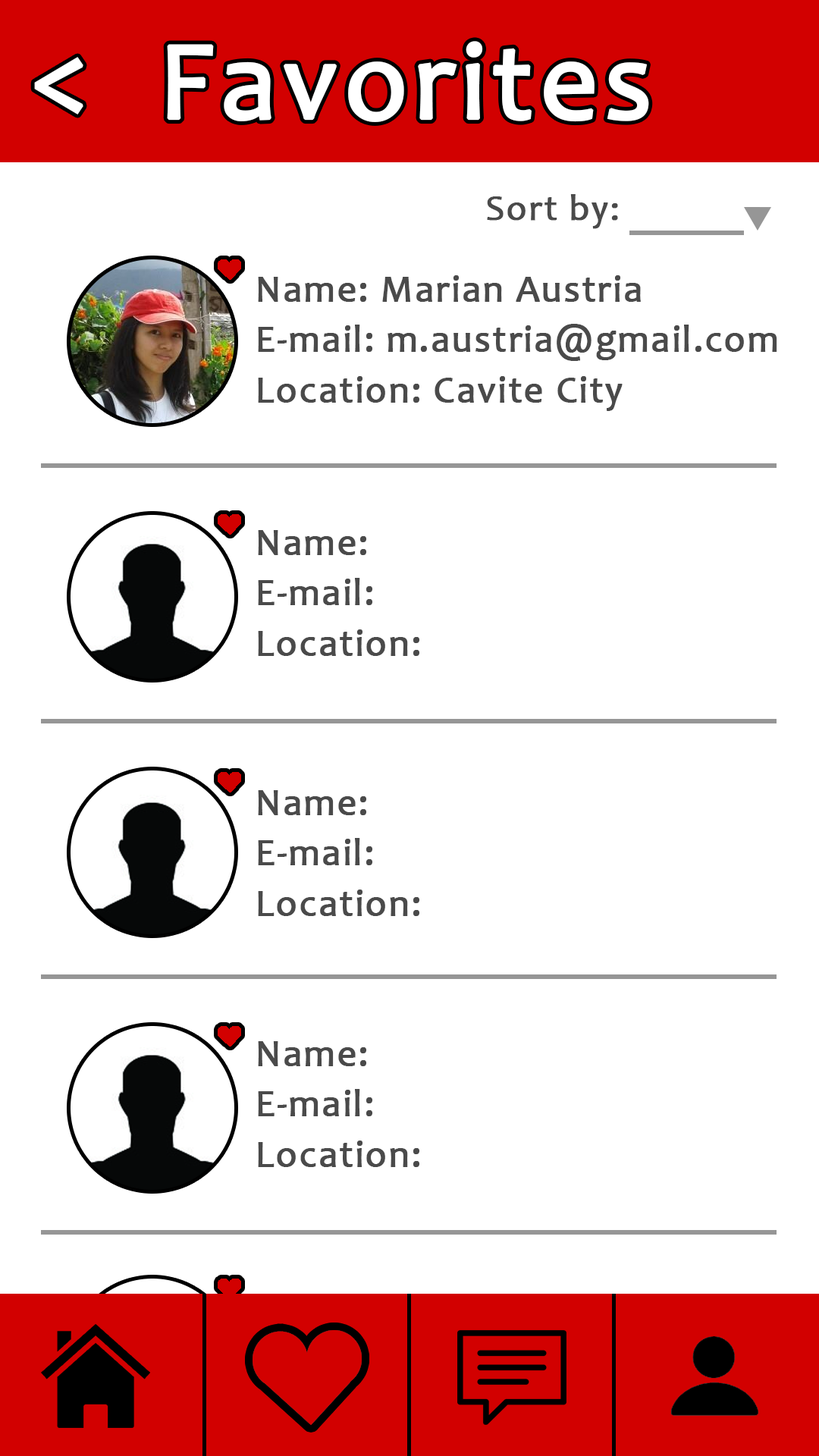
<style>
.page{position:relative;width:819px;height:1456px;background:#ffffff}
.page>*{position:absolute;margin:0}
.t1{font:113.4px "Candara";letter-spacing:0.03em;color:#ffffff;font-weight:bold}
.t2{font:113.7px "Candara";letter-spacing:0.03em;color:#ffffff;font-weight:bold}
.t3{font:36.4px "Candara";letter-spacing:0.03em;color:#4a4a4a;font-weight:bold}
.t4{font:37.9px "Candara";letter-spacing:0.03em;color:#4a4a4a;font-weight:bold}
</style>
<div class="page">
<p class="t1" style="left:167px;top:41px;width:482px;height:81px">Favorites</p>
<p class="t2" style="left:34px;top:57px;width:49px;height:58px">&lt;</p>
<p class="t3" style="left:487px;top:194px;width:131px;height:35px">Sort by:</p>
<p class="t4" style="left:258px;top:275px;width:383px;height:27px">Name: Marian Austria</p>
<p class="t4" style="left:258px;top:324px;width:519px;height:37px">E-mail: m.austria@gmail.com</p>
<p class="t4" style="left:258px;top:376px;width:365px;height:35px">Location: Cavite City</p>
<p class="t4" style="left:258px;top:530px;width:108px;height:25px">Name:</p>
<p class="t4" style="left:258px;top:578px;width:114px;height:27px">E-mail:</p>
<p class="t4" style="left:258px;top:629px;width:161px;height:27px">Location:</p>
<p class="t4" style="left:258px;top:790px;width:108px;height:25px">Name:</p>
<p class="t4" style="left:258px;top:838px;width:114px;height:27px">E-mail:</p>
<p class="t4" style="left:258px;top:890px;width:161px;height:26px">Location:</p>
<p class="t4" style="left:258px;top:1041px;width:108px;height:25px">Name:</p>
<p class="t4" style="left:258px;top:1089px;width:114px;height:27px">E-mail:</p>
<p class="t4" style="left:258px;top:1141px;width:161px;height:26px">Location:</p>
</div>
